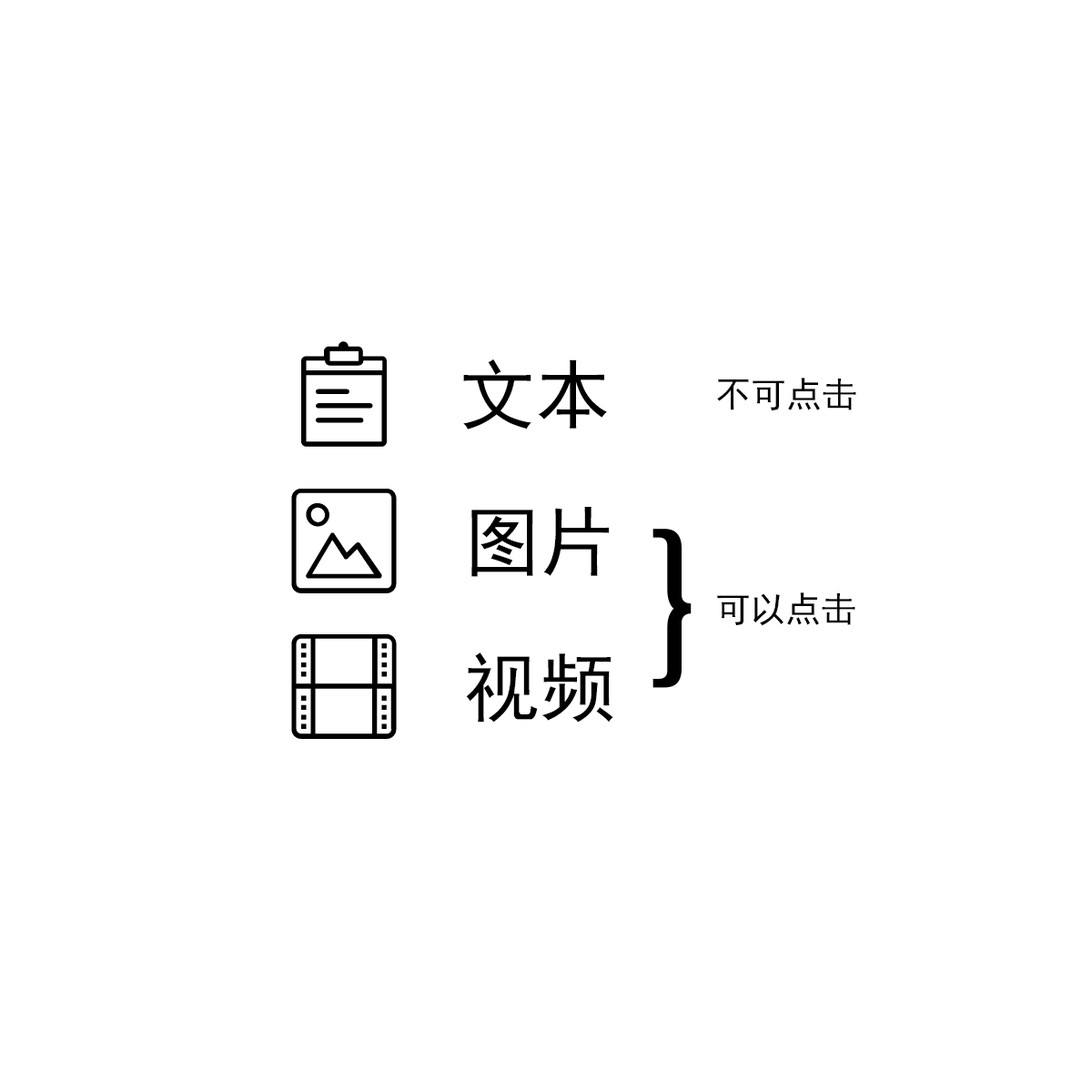
<style>
.page{position:relative;width:1092px;height:1092px;background:#ffffff}
.page>*{position:absolute;margin:0}
.t1{font:75.8px "SimHei";color:#000000}
.t2{font:35.4px "SimHei";color:#000000}
</style>
<div class="page">
<p class="t1" style="left:463px;top:359px;width:144px;height:71px">文本</p>
<p class="t2" style="left:717px;top:378px;width:139px;height:32px">不可点击</p>
<p class="t1" style="left:471px;top:507px;width:138px;height:70px">图片</p>
<p class="t2" style="left:717px;top:592px;width:138px;height:34px">可以点击</p>
<p class="t1" style="left:466px;top:652px;width:147px;height:71px">视频</p>
</div>
